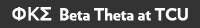
<style>
.page{position:relative;width:200px;height:28px;background:#333333}
.page>*{position:absolute;margin:0}
.t1{font:17.9px "MSReferenceSansSerif";color:#ffffff;font-weight:bold}
.t2{font:15.6px "Verlag-Bold";color:#ffffff;font-weight:bold}
</style>
<div class="page">
<p class="t1" style="left:12px;top:7px;width:40px;height:14px">ΦΚΣ</p>
<p class="t2" style="left:60px;top:8px;width:128px;height:13px">Beta Theta at TCU</p>
</div>
